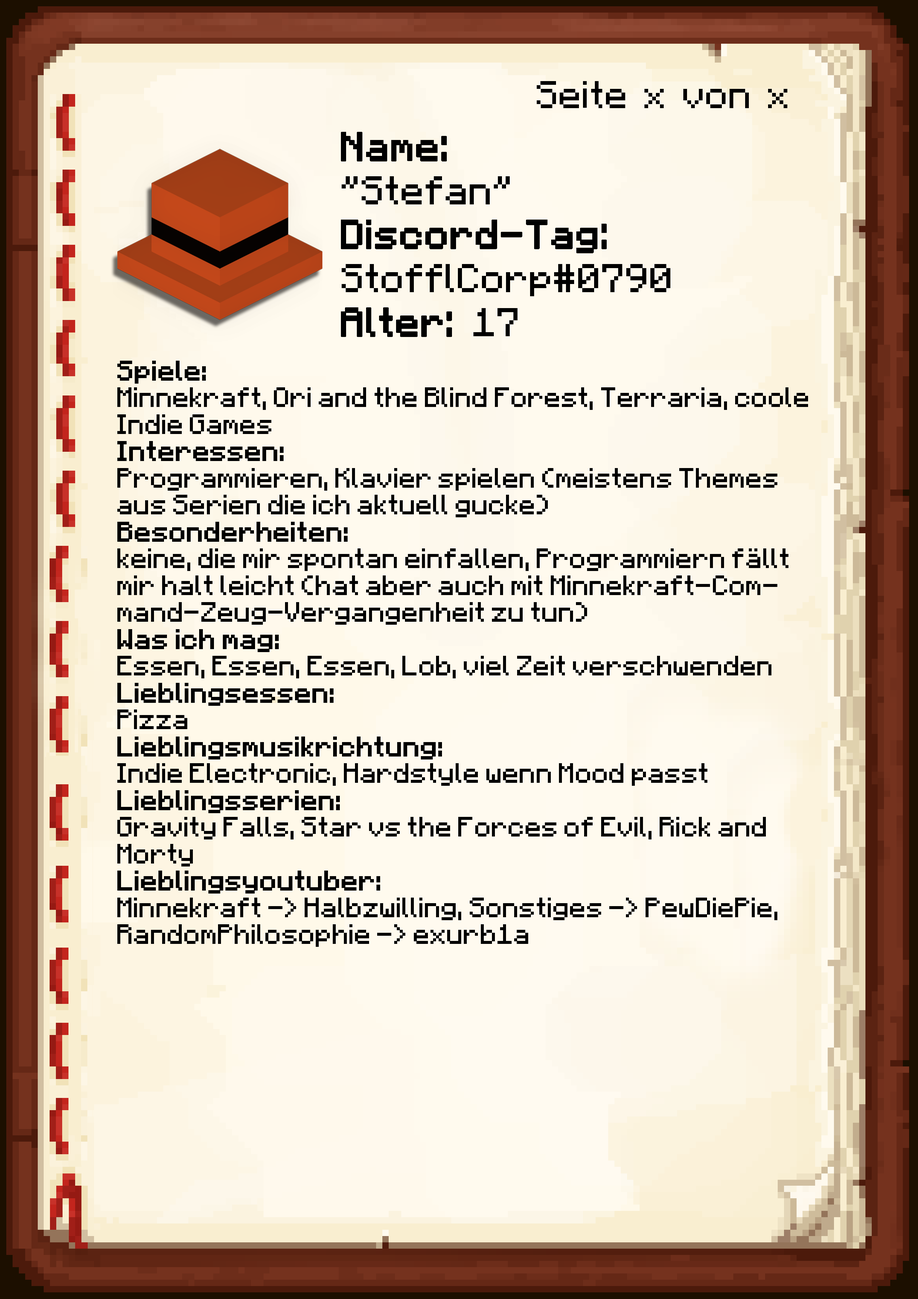
<style>
.page{position:relative;width:918px;height:1299px}
.page>*{position:absolute;margin:0}
.t1{font:38.6px "Minecraft-Regular";color:#000000}
.t2{font:40.1px/43.9px "Minecraft-Regular";color:#000000}
.t3{font:40.1px/43.9px "Minecraft-Regular";color:#000000;font-weight:bold}
.t4{font:22.4px "Minecraft";color:#000000}
.t5{font:22.4px "Minecraft";color:#000000;font-weight:bold}
</style>
<div class="page">
<p class="t1" style="left:537px;top:81px;width:250px;height:27px">Seite x von x</p>
<p class="t2" style="left:341px;top:132px;width:329px;height:205px"><span class="t3">Name:<br></span>"Stefan"<br><span class="t3">Discord-Tag:<br></span>StofflCorp#0790<br><span class="t3">Alter: </span>17</p>
<p class="t4" style="left:117px;top:361px;width:691px;height:586px"><span class="t5">Spiele: <br></span>Minnekraft, Ori and the Blind Forest, Terraria, coole Indie Games<br><span class="t5">Interessen:<br></span>Programmieren, Klavier spielen (meistens Themes aus Serien die ich aktuell gucke)<br><span class="t5">Besonderheiten:<br></span>keine, die mir spontan einfallen, Programmiern fällt mir halt leicht (hat aber auch mit Minnekraft-Command-Zeug-Vergangenheit zu tun)<br><span class="t5">Was ich mag:<br></span>Essen, Essen, Essen, Lob, viel Zeit verschwenden<br><span class="t5">Lieblingsessen:<br></span>Pizza<br><span class="t5">Lieblingsmusikrichtung:<br></span>Indie Electronic, Hardstyle wenn Mood passt<br><span class="t5">Lieblingsserien:<br></span>Gravity Falls, Star vs the Forces of Evil, Rick and Morty<br><span class="t5">Lieblingsyoutuber:<br></span>Minnekraft -&gt; Halbzwilling, Sonstiges -&gt; PewDiePie, RandomPhilosophie -&gt; exurb1a</p>
</div>
